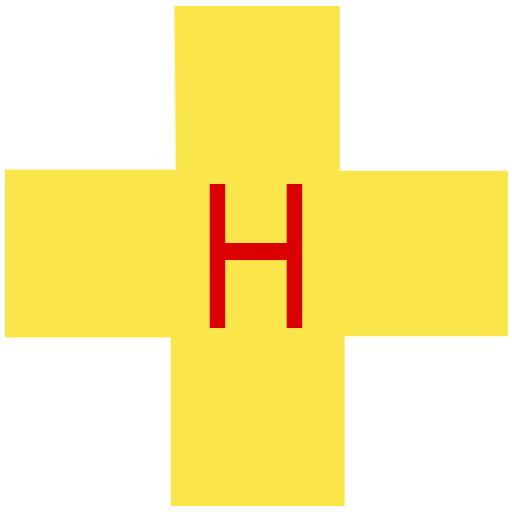
<style>
.page{position:relative;width:512px;height:512px;background:#fae54a}
.page>*{position:absolute;margin:0}
.t1{font:200.6px "ArialNarrow";color:#dc0101}
</style>
<div class="page">
<p class="t1" style="left:209px;top:184px;width:94px;height:144px">H</p>
</div>
